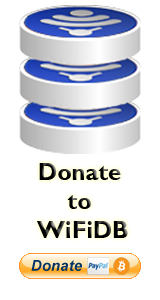
<style>
.page{position:relative;width:160px;height:300px;background:#ffffff}
.page>*{position:absolute;margin:0}
.t1{font:24px "GillSansMT-Bold";color:#000000}
</style>
<div class="page">
<p class="t1" style="left:37px;top:163px;width:91px;height:75px;text-align:center">Donate <br>to <br>WiFiDB</p>
</div>
